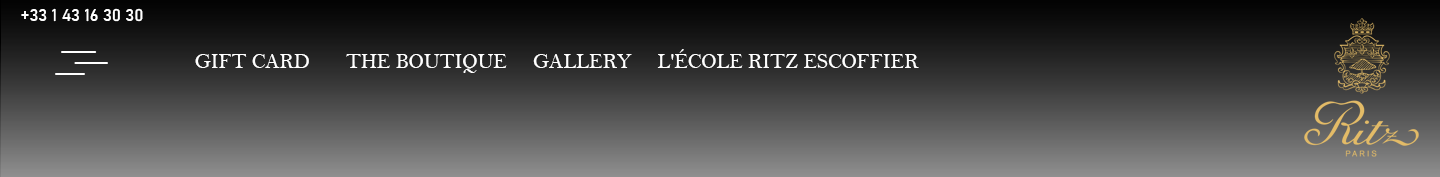
<style>
.page{position:relative;width:1440px;height:177px}
.page>*{position:absolute;margin:0}
.t1{font:16.7px "Bahnschrift";color:#ffffff}
.t2{font:20.8px "BellMT";color:#ffffff}
</style>
<div class="page">
<p class="t1" style="left:21px;top:8px;width:122px;height:14px">+33 1 43 16 30 30</p>
<p class="t2" style="left:195px;top:49px;width:724px;height:24px">GIFT CARD       THE BOUTIQUE     GALLERY     L'ÉCOLE RITZ ESCOFFIER</p>
</div>
